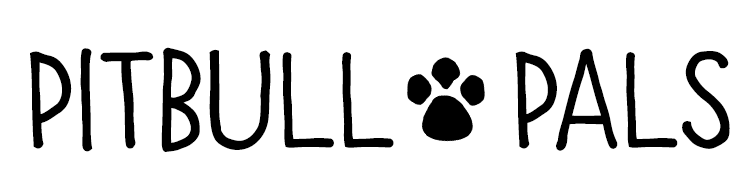
<style>
.page{position:relative;width:755px;height:195px;background:#ffffff}
.page>*{position:absolute;margin:0}
.t1{font:144px "Baronessa";color:#000000;font-weight:bold}
</style>
<div class="page">
<p class="t1" style="left:30px;top:47px;width:700px;height:105px">Pitbull  Pals</p>
</div>
